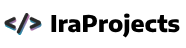
<style>
.page{position:relative;width:186px;height:48px;background:#ffffff}
.page>*{position:absolute;margin:0}
.t1{font:23px "EncodeSansSemiExpanded-ExtraBold";color:#000000}
</style>
<div class="page">
<p class="t1" style="left:51px;top:13px;width:129px;height:25px">IraProjects</p>
</div>
